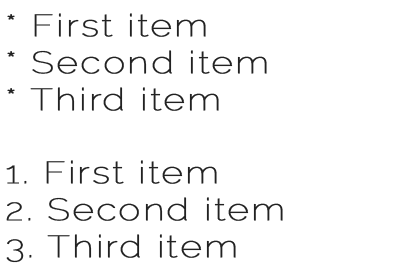
<style>
.page{position:relative;width:400px;height:278px;background:#ffffff}
.page>*{position:absolute;margin:0}
.t1{font:30.7px "Raleway-Thin";letter-spacing:0.05em;color:#222222;font-weight:bold;scale:1.2 1}
</style>
<div class="page">
<p class="t1" style="left:6px;top:13px;width:277px;height:250px">* First item<br>* Second item<br>* Third item<br><br>1. First item<br>2. Second item<br>3. Third item</p>
</div>
